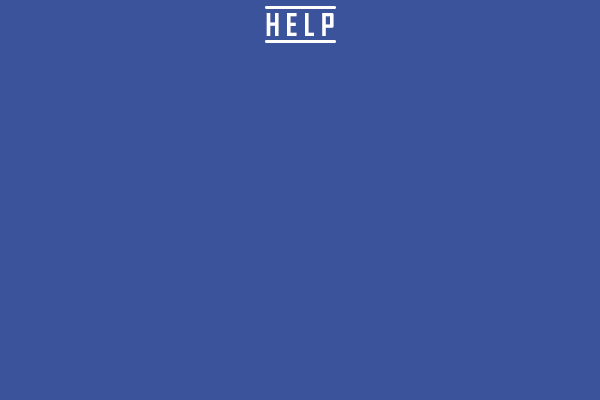
<style>
.page{position:relative;width:600px;height:400px;background:#3a539b}
.page>*{position:absolute;margin:0}
.t1{font:30px "AgencyFB-Bold";color:#ffffff}
</style>
<div class="page">
<p class="t1" style="left:266px;top:13px;width:68px;height:23px">H E L P</p>
</div>
